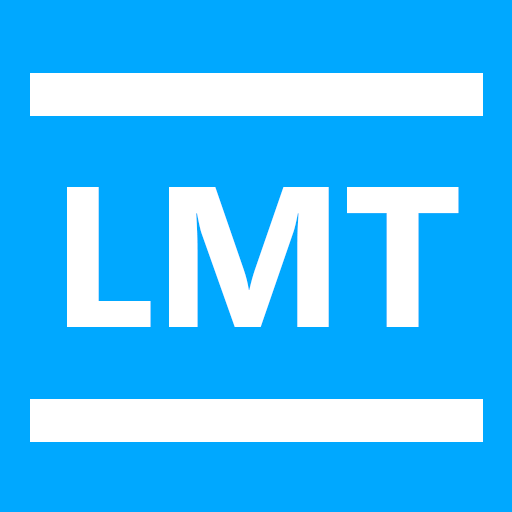
<style>
.page{position:relative;width:512px;height:512px;background:#00a8ff}
.page>*{position:absolute;margin:0}
.t1{font:200px "SegoeUI-Bold";color:#ffffff}
</style>
<div class="page">
<p class="t1" style="left:67px;top:187px;width:392px;height:140px">LMT</p>
</div>
